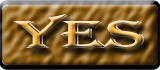
<style>
.page{position:relative;width:160px;height:70px}
.page>*{position:absolute;margin:0}
.t1{font:40.4px "Algerian";color:#fea916;scale:1.76 1}
</style>
<div class="page">
<p class="t1" style="left:13px;top:14px;width:131px;height:35px">Yes</p>
</div>
